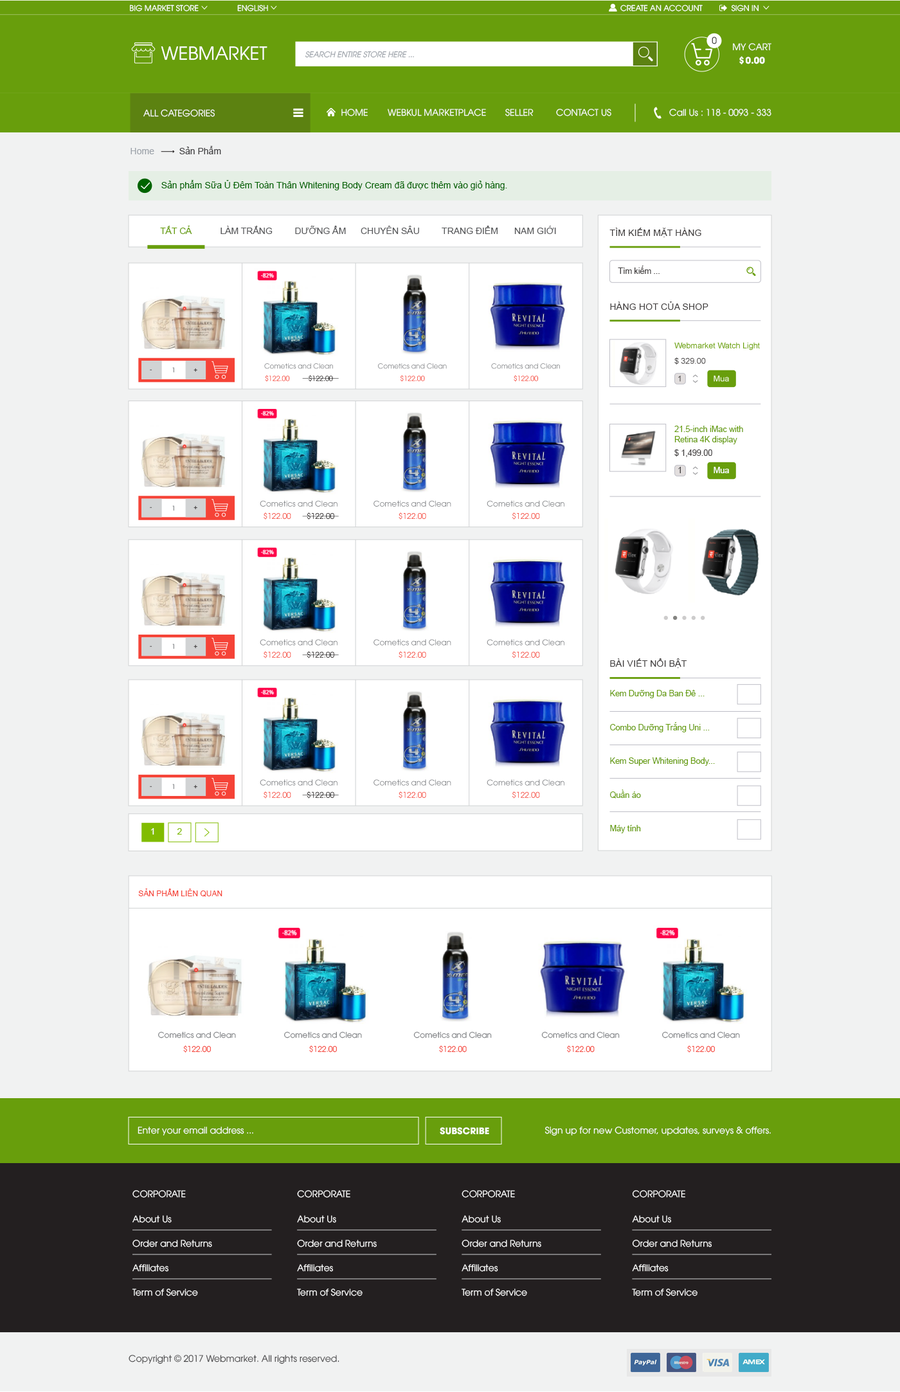
<style>
.page{position:relative;width:900px;height:1392px;background:#f1f2f2}
.page>*{position:absolute;margin:0}
.t1{font:7.7px "UTM-Avo";color:#ffffff}
.t2{font:9px "UTM-Avo"}
.t3{font:18px "UTM-Avo";color:#ffffff}
.t4{font:7.7px "UTMAvo-Italic";color:#9da3aa}
.t5{font:9px "UTM-Avo";color:#ffffff}
.t6{font:9px "UTMAvoBold";color:#ffffff}
.t7{font:9px "ArialMT";color:#9da3aa}
.t8{font:9px "ArialMT";color:#414042}
.t9{font:9px "ArialMT";color:#006400}
.t10{font:9px "ArialMT";color:#689e0c}
.t11{font:9px "ArialMT";color:#58595b}
.t12{font:9.2px "ArialMT";color:#444141}
.t13{font:8.1px "ArialMT";color:#444141}
.t14{font:6.3px "UTM-Avo"}
.t15{font:6.3px "UTM-Avo";color:#808285}
.t16{font:8.1px "ArialMT";color:#689e0c}
.t17{font:8.1px "ArialMT";color:#ffffff}
.t18{font:9px "ArialMT";color:#ffffff}
.t19{font:9px "ArialMT";color:#81bc00}
.t20{font:7.7px "ArialMT";color:#f54337}
.t21{font:7.7px "UTM-Avo";color:#808285}
.t22{font:7.7px "UTM-Avo";color:#f54337}
.t23{font:9px "UTM-Avo";color:#414042}
</style>
<div class="page">
<p class="t1" style="left:130px;top:4px;width:69px;height:8px">BIG MARKET STORE</p>
<p class="t1" style="left:237px;top:4px;width:31px;height:8px">ENGLISH</p>
<p class="t1" style="left:620px;top:4px;width:83px;height:8px">CREATE AN ACCOUNT</p>
<p class="t1" style="left:731px;top:4px;width:28px;height:8px">SIGN IN</p>
<p class="t2" style="left:712px;top:37px;width:5px;height:7px">0</p>
<p class="t3" style="left:161px;top:46px;width:106px;height:14px">WEBMARKET</p>
<p class="t4" style="left:305px;top:51px;width:109px;height:7px">SEARCH ENTIRE STORE HERE ...</p>
<p class="t5" style="left:733px;top:43px;width:38px;height:8px">MY CART</p>
<p class="t6" style="left:739px;top:56px;width:26px;height:8px">$ 0.00</p>
<p class="t5" style="left:143px;top:109px;width:72px;height:8px">ALL CATEGORIES</p>
<p class="t5" style="left:341px;top:109px;width:27px;height:7px">HOME</p>
<p class="t5" style="left:388px;top:109px;width:98px;height:7px">WEBKUL MARKETPLACE</p>
<p class="t5" style="left:505px;top:109px;width:29px;height:7px">SELLER</p>
<p class="t5" style="left:556px;top:109px;width:55px;height:7px">CONTACT US</p>
<p class="t5" style="left:669px;top:109px;width:102px;height:7px">Call Us : 118 - 0093 - 333</p>
<p class="t7" style="left:130px;top:148px;width:24px;height:6px">Home</p>
<p class="t8" style="left:179px;top:146px;width:42px;height:8px">Sản Phẩm</p>
<p class="t9" style="left:161px;top:180px;width:346px;height:10px">Sản phẩm Sữa Ủ Đêm Toàn Thân Whitening Body Cream đã được thêm vào giỏ hàng.</p>
<p class="t10" style="left:160px;top:226px;width:32px;height:8px">TẤT CẢ</p>
<p class="t11" style="left:221px;top:226px;width:52px;height:8px">LÀM TRẮNG</p>
<p class="t11" style="left:295px;top:226px;width:51px;height:8px">DƯỠNG ẨM</p>
<p class="t11" style="left:361px;top:226px;width:58px;height:8px">CHUYÊN SÂU</p>
<p class="t11" style="left:442px;top:226px;width:56px;height:8px">TRANG ĐIỂM</p>
<p class="t11" style="left:514px;top:226px;width:42px;height:8px">NAM GIỚI</p>
<p class="t12" style="left:609px;top:228px;width:92px;height:9px">TÌM KIẾM MẶT HÀNG</p>
<p class="t13" style="left:618px;top:266px;width:42px;height:8px">Tìm kiếm ...</p>
<p class="t12" style="left:610px;top:302px;width:98px;height:8px">HÀNG HOT CỦA SHOP</p>
<p class="t14" style="left:150px;top:369px;width:2px;height:1px">-</p>
<p class="t15" style="left:172px;top:367px;width:2px;height:6px">1</p>
<p class="t14" style="left:194px;top:368px;width:3px;height:4px">+</p>
<p class="t16" style="left:674px;top:426px;width:69px;height:18px">21.5‑inch iMac with<br>Retina 4K display</p>
<p class="t13" style="left:674px;top:449px;width:38px;height:8px">$ 1,499.00</p>
<p class="t13" style="left:678px;top:467px;width:3px;height:6px">1</p>
<p class="t17" style="left:714px;top:467px;width:15px;height:6px">Mua</p>
<p class="t14" style="left:150px;top:507px;width:2px;height:1px">-</p>
<p class="t15" style="left:172px;top:505px;width:2px;height:6px">1</p>
<p class="t14" style="left:194px;top:505px;width:3px;height:5px">+</p>
<p class="t14" style="left:150px;top:645px;width:2px;height:2px">-</p>
<p class="t15" style="left:172px;top:644px;width:2px;height:5px">1</p>
<p class="t14" style="left:194px;top:644px;width:3px;height:5px">+</p>
<p class="t12" style="left:610px;top:658px;width:77px;height:10px">BÀI VIẾT NỔI BẬT</p>
<p class="t16" style="left:610px;top:690px;width:95px;height:8px">Kem Dưỡng Da Ban Đê ...</p>
<p class="t16" style="left:610px;top:722px;width:100px;height:10px">Combo Dưỡng Trắng Uni ...</p>
<p class="t16" style="left:610px;top:757px;width:105px;height:9px">Kem Super Whitening Body...</p>
<p class="t14" style="left:150px;top:786px;width:2px;height:1px">-</p>
<p class="t15" style="left:172px;top:784px;width:2px;height:5px">1</p>
<p class="t14" style="left:194px;top:784px;width:3px;height:5px">+</p>
<p class="t16" style="left:610px;top:789px;width:31px;height:9px">Quần áo</p>
<p class="t18" style="left:151px;top:828px;width:3px;height:6px">1</p>
<p class="t19" style="left:177px;top:828px;width:5px;height:6px">2</p>
<p class="t16" style="left:610px;top:825px;width:31px;height:8px">Máy tính</p>
<p class="t20" style="left:138px;top:888px;width:84px;height:9px">SẢN PHẨM LIÊN QUAN</p>
<p class="t21" style="left:158px;top:1031px;width:78px;height:7px">Cometics and Clean</p>
<p class="t21" style="left:284px;top:1031px;width:78px;height:7px">Cometics and Clean</p>
<p class="t21" style="left:413px;top:1031px;width:79px;height:7px">Cometics and Clean</p>
<p class="t21" style="left:541px;top:1031px;width:79px;height:7px">Cometics and Clean</p>
<p class="t21" style="left:662px;top:1031px;width:78px;height:7px">Cometics and Clean</p>
<p class="t22" style="left:183px;top:1045px;width:28px;height:7px">$122.00</p>
<p class="t22" style="left:309px;top:1045px;width:28px;height:7px">$122.00</p>
<p class="t22" style="left:439px;top:1045px;width:28px;height:7px">$122.00</p>
<p class="t22" style="left:567px;top:1045px;width:28px;height:7px">$122.00</p>
<p class="t22" style="left:687px;top:1045px;width:28px;height:7px">$122.00</p>
<p class="t5" style="left:138px;top:1126px;width:115px;height:9px">Enter your email address ...</p>
<p class="t6" style="left:440px;top:1127px;width:49px;height:8px">SUBSCRIBE</p>
<p class="t5" style="left:544px;top:1126px;width:227px;height:10px">Sign up for new Customer, updates, surveys &amp; offers.</p>
<p class="t5" style="left:132px;top:1190px;width:54px;height:8px">CORPORATE</p>
<p class="t5" style="left:297px;top:1190px;width:53px;height:8px">CORPORATE</p>
<p class="t5" style="left:462px;top:1190px;width:53px;height:8px">CORPORATE</p>
<p class="t5" style="left:632px;top:1190px;width:53px;height:8px">CORPORATE</p>
<p class="t5" style="left:132px;top:1215px;width:40px;height:8px">About Us</p>
<p class="t5" style="left:297px;top:1215px;width:39px;height:8px">About Us</p>
<p class="t5" style="left:462px;top:1215px;width:39px;height:8px">About Us</p>
<p class="t5" style="left:632px;top:1215px;width:39px;height:8px">About Us</p>
<p class="t5" style="left:132px;top:1239px;width:80px;height:8px">Order and Returns</p>
<p class="t5" style="left:297px;top:1239px;width:80px;height:8px">Order and Returns</p>
<p class="t5" style="left:462px;top:1239px;width:79px;height:8px">Order and Returns</p>
<p class="t5" style="left:632px;top:1239px;width:80px;height:8px">Order and Returns</p>
<p class="t5" style="left:132px;top:1264px;width:36px;height:8px">Affiliates</p>
<p class="t5" style="left:297px;top:1264px;width:36px;height:8px">Affiliates</p>
<p class="t5" style="left:462px;top:1264px;width:36px;height:8px">Affiliates</p>
<p class="t5" style="left:632px;top:1264px;width:37px;height:8px">Affiliates</p>
<p class="t5" style="left:132px;top:1288px;width:66px;height:8px">Term of Service</p>
<p class="t5" style="left:297px;top:1288px;width:66px;height:8px">Term of Service</p>
<p class="t5" style="left:462px;top:1288px;width:65px;height:8px">Term of Service</p>
<p class="t5" style="left:632px;top:1288px;width:66px;height:8px">Term of Service</p>
<p class="t23" style="left:129px;top:1354px;width:210px;height:10px">Copyright © 2017 Webmarket. All rights reserved.</p>
</div>
